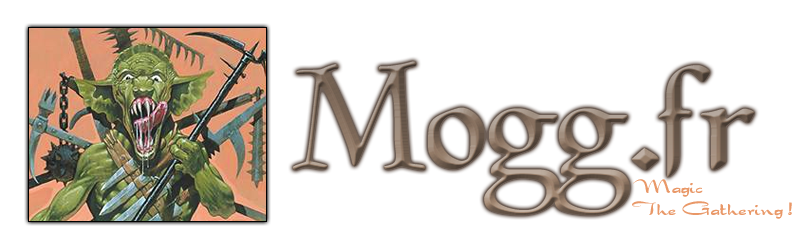
<style>
.page{position:relative;width:800px;height:250px;background:#ffffff}
.page>*{position:absolute;margin:0}
.t1{font:150px "Magic:theGathering"}
.t2{font:18px "Dragonwick-Regular";color:#dd9873}
</style>
<div class="page">
<p class="t1" style="left:292px;top:61px;width:463px;height:154px">Mogg.fr</p>
<p class="t2" style="left:632px;top:179px;width:160px;height:40px">Magic<br>The Gathering !</p>
</div>
